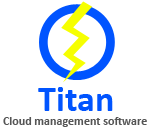
<style>
.page{position:relative;width:151px;height:132px;background:#ffffff}
.page>*{position:absolute;margin:0}
.t1{font:36px "Calibri-Bold";color:#0054ff}
.t2{font:12px "Calibri-Bold";color:#555555}
</style>
<div class="page">
<p class="t1" style="left:38px;top:87px;width:75px;height:24px">Titan</p>
<p class="t2" style="left:3px;top:117px;width:144px;height:10px">Cloud management software</p>
</div>
